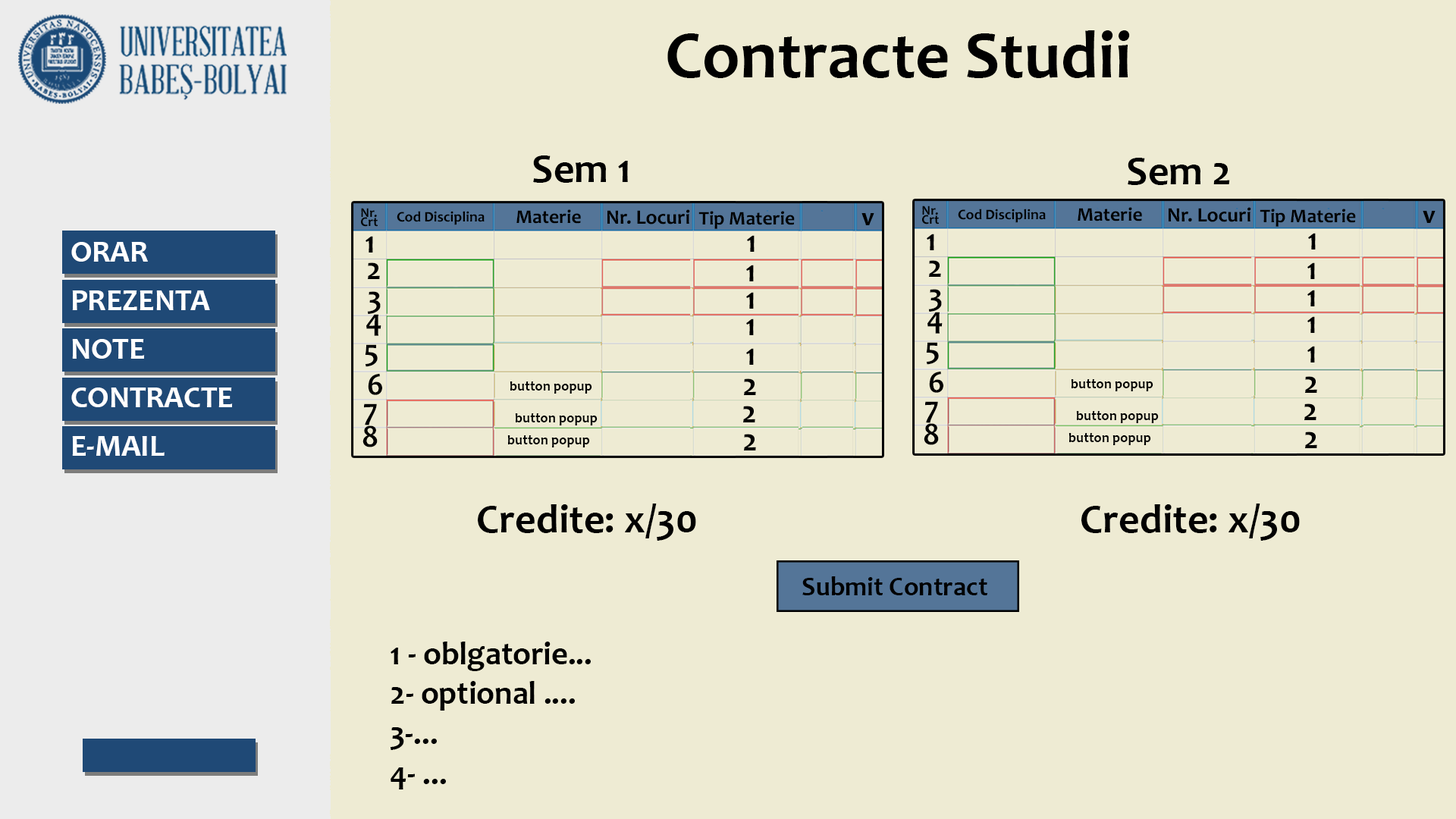
<style>
.page{position:relative;width:1456px;height:819px;background:#eeebd3}
.page>*{position:absolute;margin:0}
.t1{font:67.5px "Candara-Bold";color:#000000}
.t2{font:41.1px "Candara-Bold";color:#000000}
.t3{font:13.5px/9px "Candara-Bold";color:#000000}
.t4{font:19.5px "Candara-Bold";color:#000000}
.t5{font:20.4px "Candara-Bold";color:#000000}
.t6{font:14.7px "Candara-Bold";color:#000000}
.t7{font:26.1px "Candara-Bold";color:#000000}
.t8{font:31.3px "Candara-Bold";color:#000000}
.t9{font:30px/48.4px "Candara-Bold";color:#ffffff;scale:1.03 1}
.t10{font:14px "Candara-Bold";color:#000000}
.t11{font:26.6px "Candara-Bold";color:#000000}
.t12{font:32.3px/40.1px "Candara-Bold";color:#000000}
</style>
<div class="page">
<p class="t1" style="left:667px;top:30px;width:463px;height:48px">Contracte Studii</p>
<p class="t2" style="left:533px;top:155px;width:95px;height:28px">Sem 1</p>
<p class="t2" style="left:1128px;top:158px;width:102px;height:27px">Sem 2</p>
<p class="t3" style="left:361px;top:208px;width:17px;height:19px">Nr.<br>Crt</p>
<p class="t4" style="left:516px;top:209px;width:65px;height:15px">Materie</p>
<p class="t5" style="left:607px;top:209px;width:83px;height:15px">Nr. Locuri</p>
<p class="t3" style="left:922px;top:206px;width:17px;height:18px">Nr.<br>Crt</p>
<p class="t6" style="left:958px;top:209px;width:88px;height:14px">Cod Disciplina</p>
<p class="t4" style="left:1078px;top:207px;width:64px;height:14px">Materie</p>
<p class="t5" style="left:1169px;top:207px;width:82px;height:15px">Nr. Locuri</p>
<p class="t4" style="left:1260px;top:209px;width:96px;height:18px">Tip Materie</p>
<p class="t6" style="left:397px;top:211px;width:88px;height:14px">Cod Disciplina</p>
<p class="t4" style="left:698px;top:211px;width:97px;height:18px">Tip Materie</p>
<p class="t7" style="left:861px;top:213px;width:13px;height:12px">v</p>
<p class="t7" style="left:1423px;top:211px;width:13px;height:12px">v</p>
<p class="t8" style="left:927px;top:234px;width:7px;height:16px">1</p>
<p class="t8" style="left:1308px;top:233px;width:8px;height:16px">1</p>
<p class="t9" style="left:71px;top:242px;width:162px;height:214px">ORAR<br>PREZENTA<br>NOTE<br>CONTRACTE<br>E-MAIL</p>
<p class="t8" style="left:366px;top:236px;width:7px;height:17px">1</p>
<p class="t8" style="left:747px;top:235px;width:8px;height:17px">1</p>
<p class="t8" style="left:368px;top:262px;width:12px;height:17px">2</p>
<p class="t8" style="left:746px;top:265px;width:8px;height:16px">1</p>
<p class="t8" style="left:929px;top:260px;width:12px;height:17px">2</p>
<p class="t8" style="left:1307px;top:262px;width:8px;height:17px">1</p>
<p class="t8" style="left:367px;top:291px;width:14px;height:23px">3</p>
<p class="t8" style="left:746px;top:292px;width:8px;height:17px">1</p>
<p class="t8" style="left:928px;top:289px;width:14px;height:23px">3</p>
<p class="t8" style="left:1307px;top:290px;width:8px;height:16px">1</p>
<p class="t8" style="left:366px;top:314px;width:15px;height:22px">4</p>
<p class="t8" style="left:927px;top:312px;width:16px;height:22px">4</p>
<p class="t8" style="left:1307px;top:316px;width:8px;height:17px">1</p>
<p class="t8" style="left:746px;top:318px;width:8px;height:17px">1</p>
<p class="t8" style="left:365px;top:344px;width:13px;height:23px">5</p>
<p class="t8" style="left:746px;top:348px;width:8px;height:17px">1</p>
<p class="t8" style="left:926px;top:342px;width:13px;height:23px">5</p>
<p class="t8" style="left:1307px;top:346px;width:8px;height:16px">1</p>
<p class="t8" style="left:368px;top:374px;width:14px;height:21px">6</p>
<p class="t8" style="left:929px;top:372px;width:14px;height:21px">6</p>
<p class="t8" style="left:1305px;top:376px;width:12px;height:17px">2</p>
<p class="t10" style="left:510px;top:381px;width:82px;height:13px">button popup</p>
<p class="t8" style="left:744px;top:378px;width:12px;height:17px">2</p>
<p class="t10" style="left:1071px;top:379px;width:82px;height:12px">button popup</p>
<p class="t8" style="left:925px;top:401px;width:13px;height:22px">7</p>
<p class="t8" style="left:364px;top:403px;width:13px;height:22px">7</p>
<p class="t10" style="left:515px;top:413px;width:83px;height:12px">button popup</p>
<p class="t8" style="left:743px;top:406px;width:12px;height:16px">2</p>
<p class="t10" style="left:1076px;top:411px;width:83px;height:12px">button popup</p>
<p class="t8" style="left:1304px;top:403px;width:12px;height:17px">2</p>
<p class="t8" style="left:362px;top:425px;width:16px;height:22px">8</p>
<p class="t8" style="left:924px;top:423px;width:15px;height:22px">8</p>
<p class="t10" style="left:507px;top:435px;width:83px;height:12px">button popup</p>
<p class="t8" style="left:744px;top:434px;width:12px;height:16px">2</p>
<p class="t10" style="left:1068px;top:433px;width:83px;height:12px">button popup</p>
<p class="t8" style="left:1305px;top:431px;width:12px;height:17px">2</p>
<p class="t2" style="left:478px;top:504px;width:218px;height:37px">Credite: x/30</p>
<p class="t2" style="left:1081px;top:504px;width:219px;height:37px">Credite: x/30</p>
<p class="t11" style="left:802px;top:576px;width:185px;height:19px">Submit Contract</p>
<p class="t12" style="left:390px;top:642px;width:201px;height:147px">1 - oblgatorie...<br>2- optional ....<br>3-...<br>4- ...</p>
</div>
